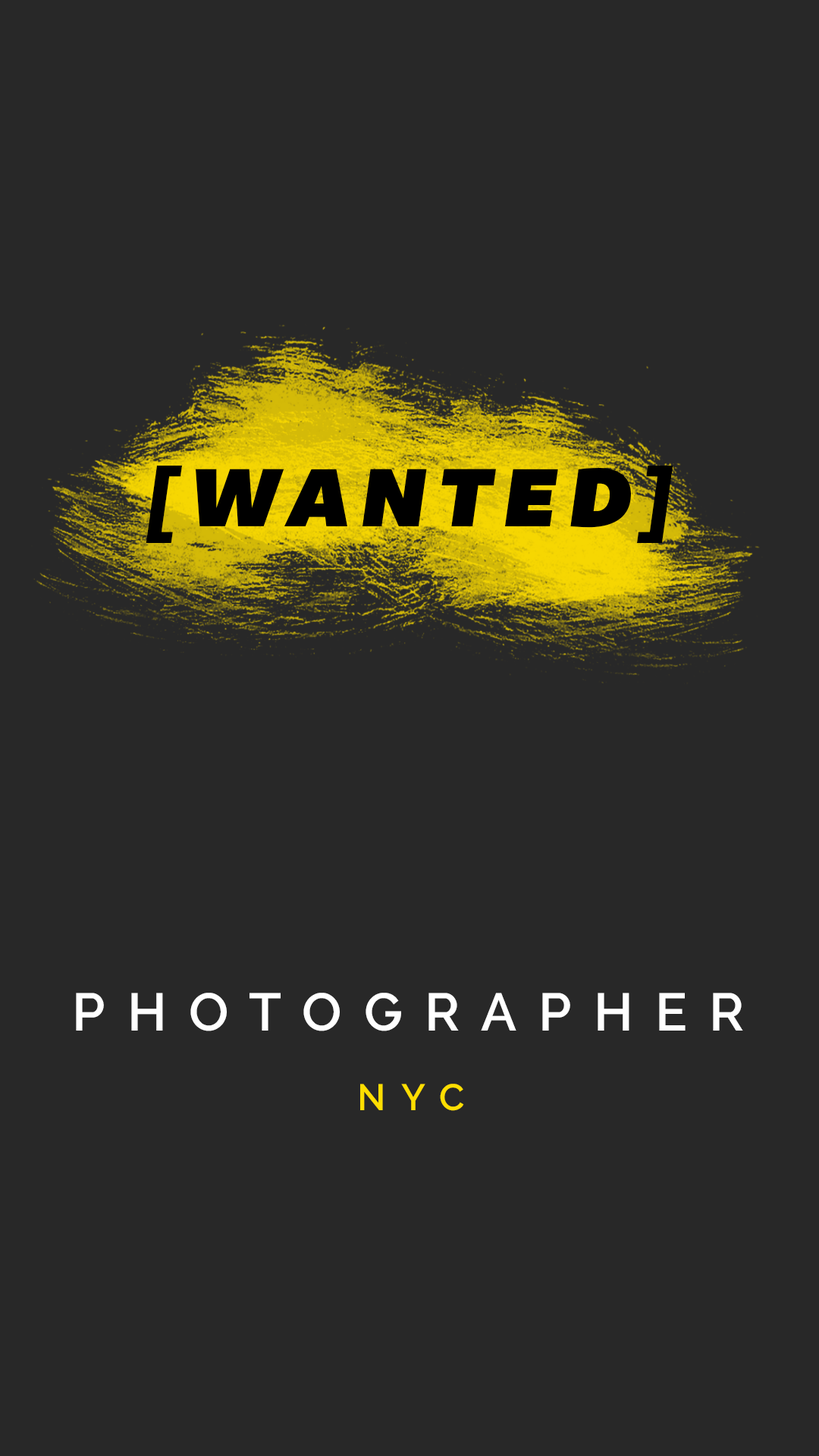
<style>
.page{position:relative;width:819px;height:1456px;background:#282828}
.page>*{position:absolute;margin:0}
.t1{font:84.6px "BemioItalic";letter-spacing:0.14em;color:#000000}
.t2{font:52.8px "Raleway-SemiBold";letter-spacing:0.42em;color:#ffffff;text-transform:uppercase}
.t3{font:36.9px "Raleway-SemiBold";letter-spacing:0.42em;color:#ffde00;text-transform:uppercase}
</style>
<div class="page">
<p class="t1" style="left:146px;top:466px;width:527px;height:77px">[WANTED]</p>
<p class="t2" style="left:76px;top:993px;width:667px;height:38px">photographer</p>
<p class="t3" style="left:360px;top:1084px;width:104px;height:27px">nyc</p>
</div>
